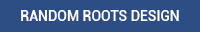
<style>
.page{position:relative;width:200px;height:32px;background:#2c4e85}
.page>*{position:absolute;margin:0}
.t1{font:14px "Roboto-Medium";color:#ffffff}
</style>
<div class="page">
<p class="t1" style="left:21px;top:10px;width:158px;height:11px">RANDOM ROOTS DESIGN</p>
</div>
